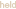
<style>
.page{position:relative;width:16px;height:9px;background:#ffffff}
.page>*{position:absolute;margin:0}
.t1{font:8px "GothicMB101Pro-Regular";color:#dfceb7}
</style>
<div class="page">
<p class="t1" style="left:0px;top:1px;width:17px;height:7px">held</p>
</div>
